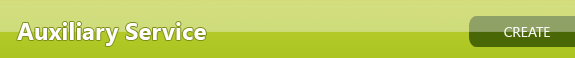
<style>
.page{position:relative;width:575px;height:58px}
.page>*{position:absolute;margin:0}
.t1{font:24px "SegoeUI-Bold";color:#fefefe}
.t2{font:14px "SegoeUI";color:#f6f7f1}
</style>
<div class="page">
<p class="t1" style="left:17px;top:22px;width:189px;height:24px">Auxiliary Service</p>
<p class="t2" style="left:504px;top:27px;width:46px;height:10px">CREATE</p>
</div>
